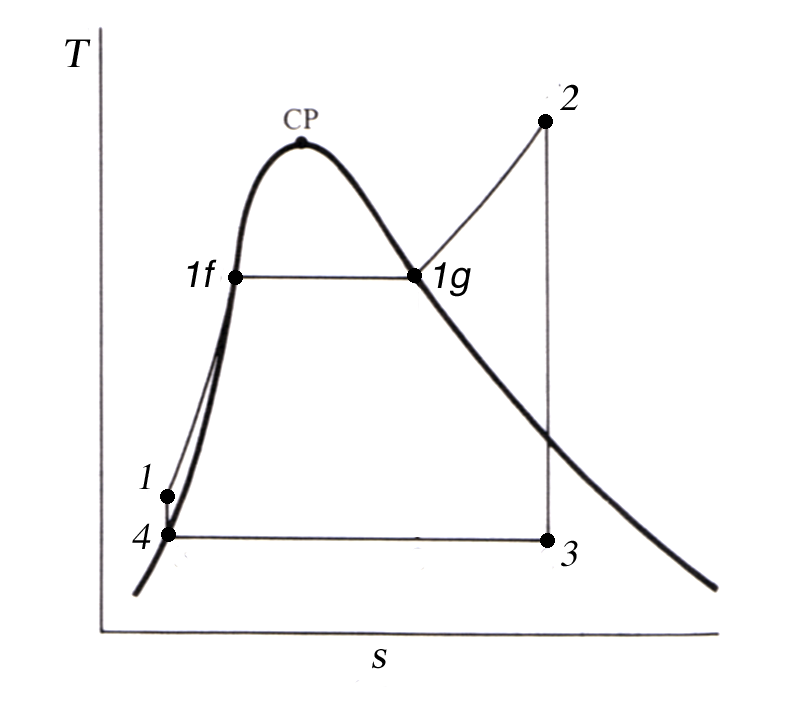
<style>
.page{position:relative;width:788px;height:724px;background:#ffffff}
.page>*{position:absolute;margin:0}
.t1{font:41.5px "Times-Roman";color:#000000;font-style:italic}
.t2{font:37.4px "Times-Roman";color:#000000;font-style:italic}
.t3{font:37.4px "Helvetica";color:#000000;font-style:italic}
</style>
<div class="page">
<p class="t1" style="left:65px;top:39px;width:26px;height:28px">T</p>
<p class="t2" style="left:560px;top:84px;width:19px;height:26px">2</p>
<p class="t3" style="left:187px;top:259px;width:30px;height:28px">1f</p>
<p class="t3" style="left:434px;top:262px;width:37px;height:35px">1g</p>
<p class="t2" style="left:139px;top:463px;width:12px;height:26px">1</p>
<p class="t2" style="left:132px;top:523px;width:19px;height:26px">4</p>
<p class="t2" style="left:561px;top:540px;width:17px;height:27px">3</p>
<p class="t1" style="left:372px;top:649px;width:15px;height:20px">s</p>
</div>
